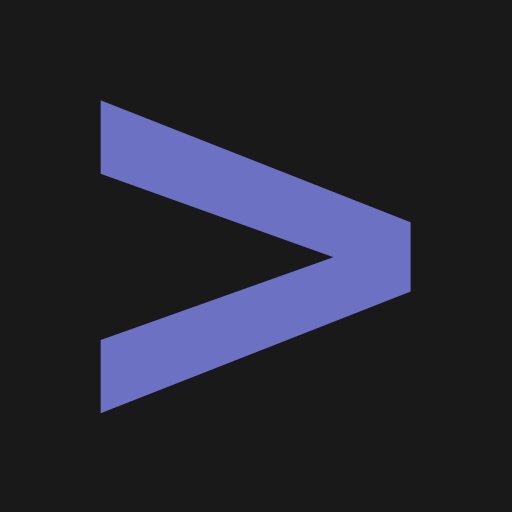
<style>
.page{position:relative;width:512px;height:512px;background:#191919}
.page>*{position:absolute;margin:0}
.t1{font:600px "Hack-Bold";color:#6c71c4}
</style>
<div class="page">
<p class="t1" style="left:100px;top:100px;width:311px;height:314px">&gt;</p>
</div>
